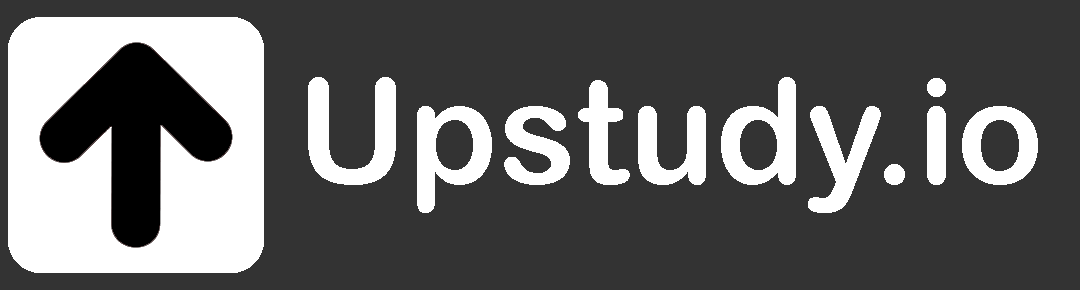
<style>
.page{position:relative;width:1080px;height:290px;background:#333333}
.page>*{position:absolute;margin:0}
.t1{font:145px "ArialRoundedMTBold";color:#ffffff}
</style>
<div class="page">
<p class="t1" style="left:308px;top:77px;width:730px;height:136px">Upstudy.io</p>
</div>
